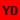
<style>
.page{position:relative;width:20px;height:20px;background:#ff0000}
.page>*{position:absolute;margin:0}
.t1{font:12px "CharcoalCY";color:#1b1b1b}
</style>
<div class="page">
<p class="t1" style="left:2px;top:6px;width:16px;height:9px">YD</p>
</div>
